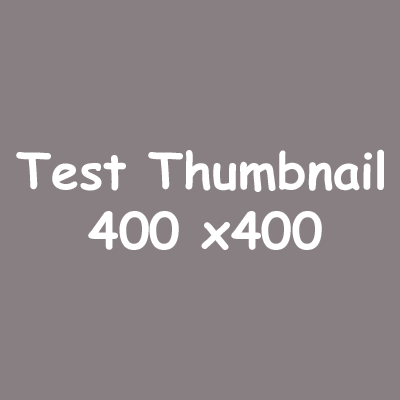
<style>
.page{position:relative;width:400px;height:400px;background:#887f82}
.page>*{position:absolute;margin:0}
.t1{font:50px "ComicSansMS-Bold";color:#ffffff}
</style>
<div class="page">
<p class="t1" style="left:16px;top:149px;width:368px;height:101px">Test Thumbnail<br>  400 x400</p>
</div>
